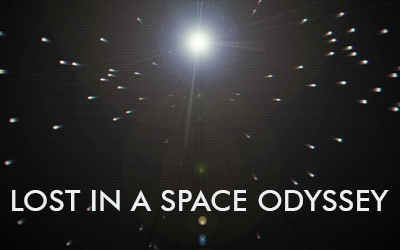
<style>
.page{position:relative;width:400px;height:250px}
.page>*{position:absolute;margin:0}
.t1{font:30px "FuturaBT-Medium";color:#ecf0f1}
</style>
<div class="page">
<p class="t1" style="left:12px;top:190px;width:377px;height:21px">LOST IN A SPACE ODYSSEY</p>
</div>
